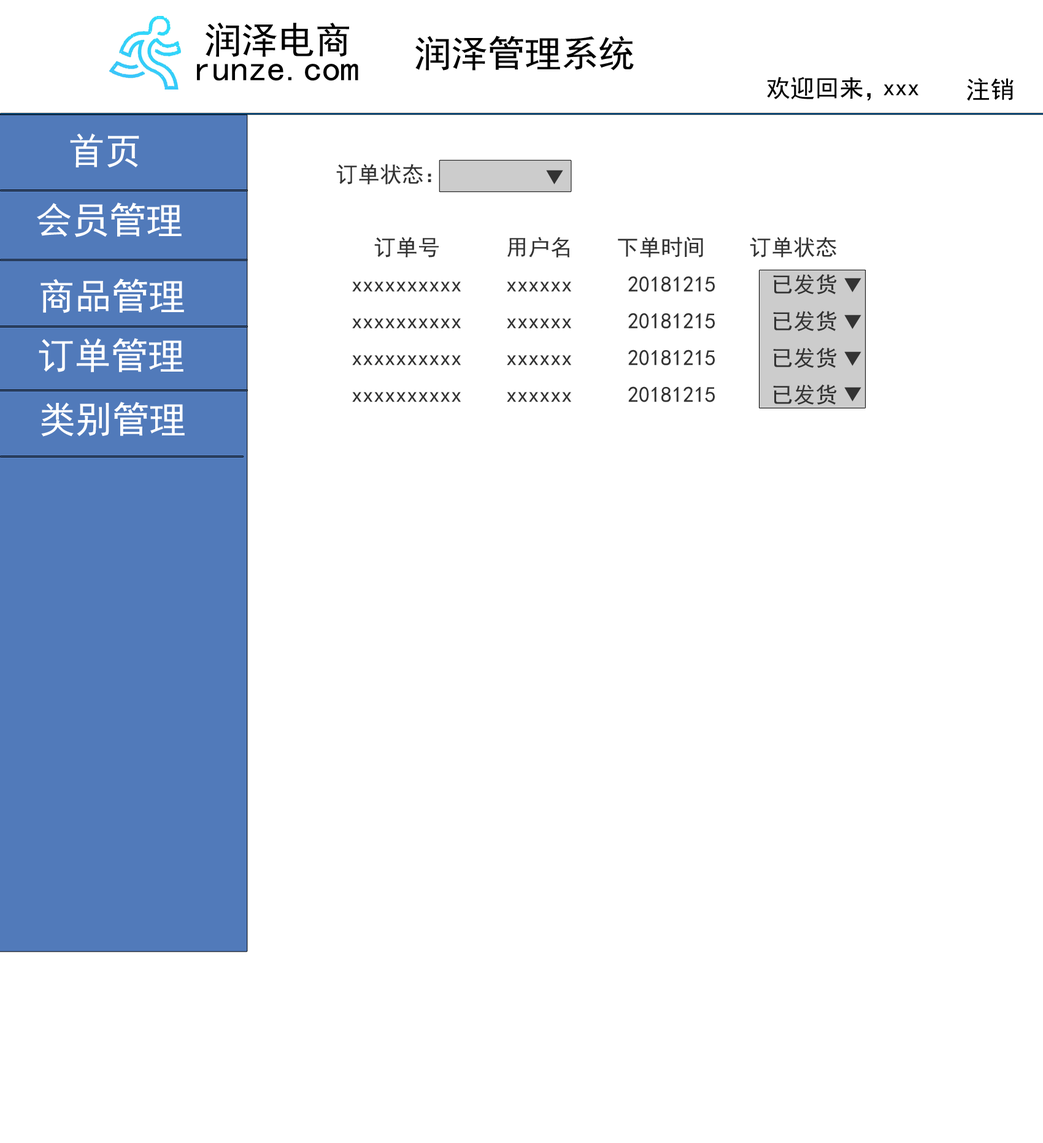
<style>
.page{position:relative;width:1043px;height:1143px;background:#ffffff}
.page>*{position:absolute;margin:0}
.t1{font:36.8px "SimHei";color:#010101}
.t2{font:24.5px "SimHei";color:#000000}
.t3{font:36.8px "SimHei";color:#ffffff}
.t4{font:22.1px "SimHei";color:#333333}
.t5{font:22.1px/18.4px "SimHei";color:#333333}
</style>
<div class="page">
<p class="t1" style="left:206px;top:23px;width:143px;height:34px">润泽电商</p>
<p class="t1" style="left:415px;top:36px;width:219px;height:35px">润泽管理系统</p>
<p class="t1" style="left:197px;top:64px;width:161px;height:17px">runze.com</p>
<p class="t2" style="left:767px;top:77px;width:103px;height:24px">欢迎回来，</p>
<p class="t2" style="left:967px;top:78px;width:46px;height:23px">注销</p>
<p class="t2" style="left:883px;top:84px;width:35px;height:12px">xxx</p>
<p class="t3" style="left:70px;top:133px;width:69px;height:34px">首页</p>
<p class="t4" style="left:336px;top:164px;width:95px;height:21px">订单状态：</p>
<p class="t4" style="left:546px;top:170px;width:17px;height:15px">▼</p>
<p class="t3" style="left:37px;top:202px;width:145px;height:35px">会员管理</p>
<p class="t5" style="left:352px;top:237px;width:485px;height:168px">订单号      用户名    下单时间    订单状态<br><br>xxxxxxxxxx    xxxxxx     20181215     已发货<br><br>xxxxxxxxxx    xxxxxx     20181215     已发货<br><br>xxxxxxxxxx    xxxxxx     20181215     已发货<br><br>xxxxxxxxxx    xxxxxx     20181215     已发货</p>
<p class="t3" style="left:40px;top:279px;width:144px;height:34px">商品管理</p>
<p class="t4" style="left:844px;top:278px;width:17px;height:15px">▼</p>
<p class="t4" style="left:844px;top:315px;width:17px;height:14px">▼</p>
<p class="t3" style="left:39px;top:338px;width:144px;height:34px">订单管理</p>
<p class="t4" style="left:844px;top:351px;width:17px;height:15px">▼</p>
<p class="t4" style="left:844px;top:387px;width:17px;height:15px">▼</p>
<p class="t3" style="left:41px;top:402px;width:144px;height:35px">类别管理</p>
</div>
